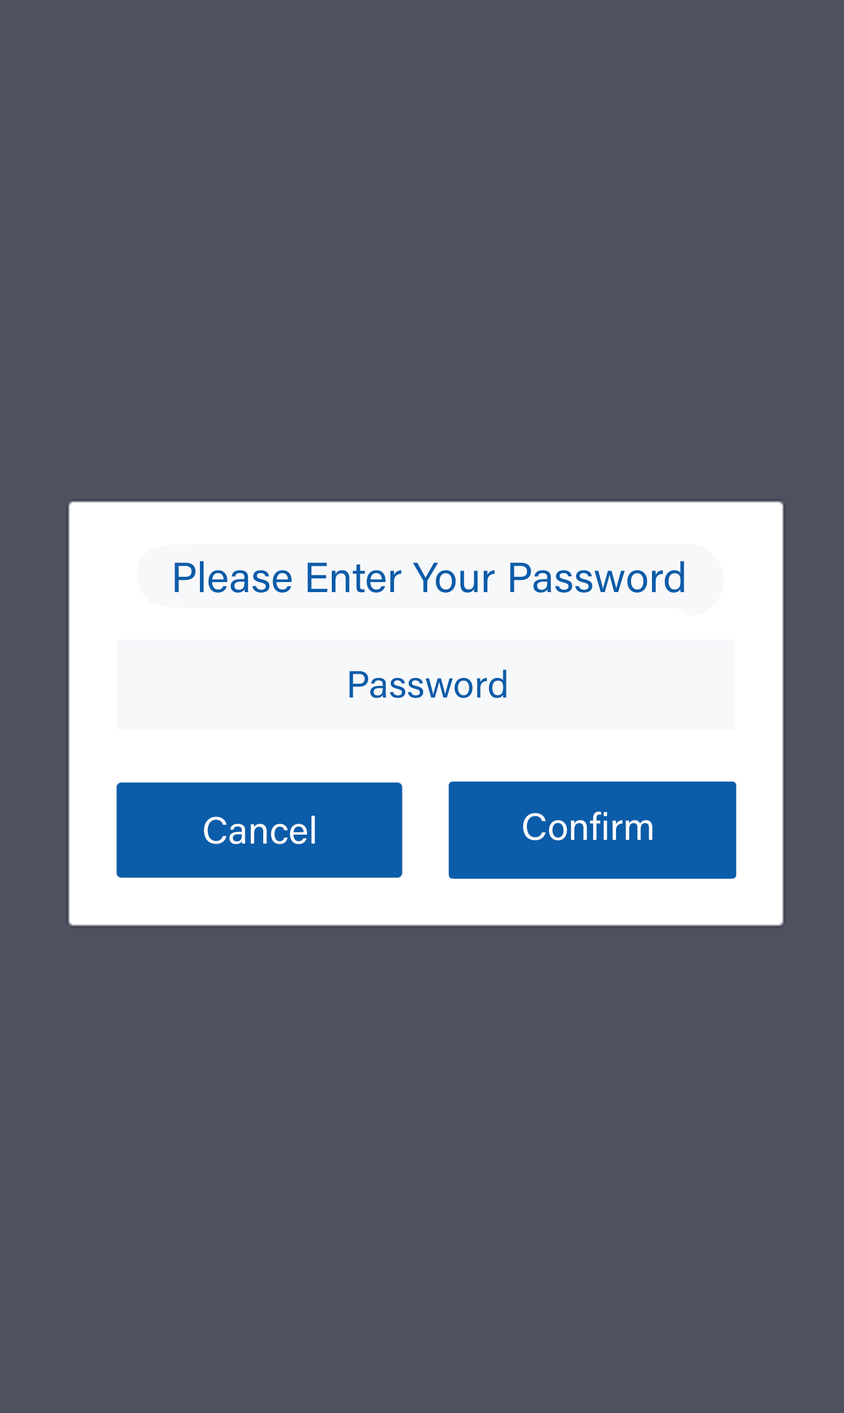
<style>
.page{position:relative;width:844px;height:1413px;background:#505160}
.page>*{position:absolute;margin:0}
.t1{font:42.2px "AcuminConcept-Regular";color:#0b5ca9;font-style:italic}
.t2{font:38px "AcuminConcept-Regular";color:#0b5ca9;font-style:italic}
.t3{font:38px "AcuminConcept-Regular";color:#fafbfc;font-style:italic}
</style>
<div class="page">
<p class="t1" style="left:175px;top:561px;width:509px;height:32px">Please Enter Your Password</p>
<p class="t2" style="left:349px;top:670px;width:157px;height:28px">Password</p>
<p class="t3" style="left:204px;top:816px;width:111px;height:28px">Cancel</p>
<p class="t3" style="left:523px;top:812px;width:129px;height:29px">Confirm</p>
</div>
